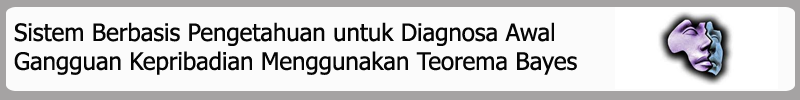
<style>
.page{position:relative;width:800px;height:100px;background:#fbfbfb}
.page>*{position:absolute;margin:0}
.t1{font:24px "Tahoma";color:#050505}
</style>
<div class="page">
<p class="t1" style="left:14px;top:22px;width:563px;height:53px">Sistem Berbasis Pengetahuan untuk Diagnosa Awal <br>Gangguan Kepribadian Menggunakan Teorema Bayes</p>
</div>
